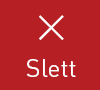
<style>
.page{position:relative;width:100px;height:90px;background:#b61f24}
.page>*{position:absolute;margin:0}
.t1{font:24.5px "DIN-Regular";color:#ffffff}
</style>
<div class="page">
<p class="t1" style="left:26px;top:59px;width:50px;height:18px">Slett</p>
</div>
